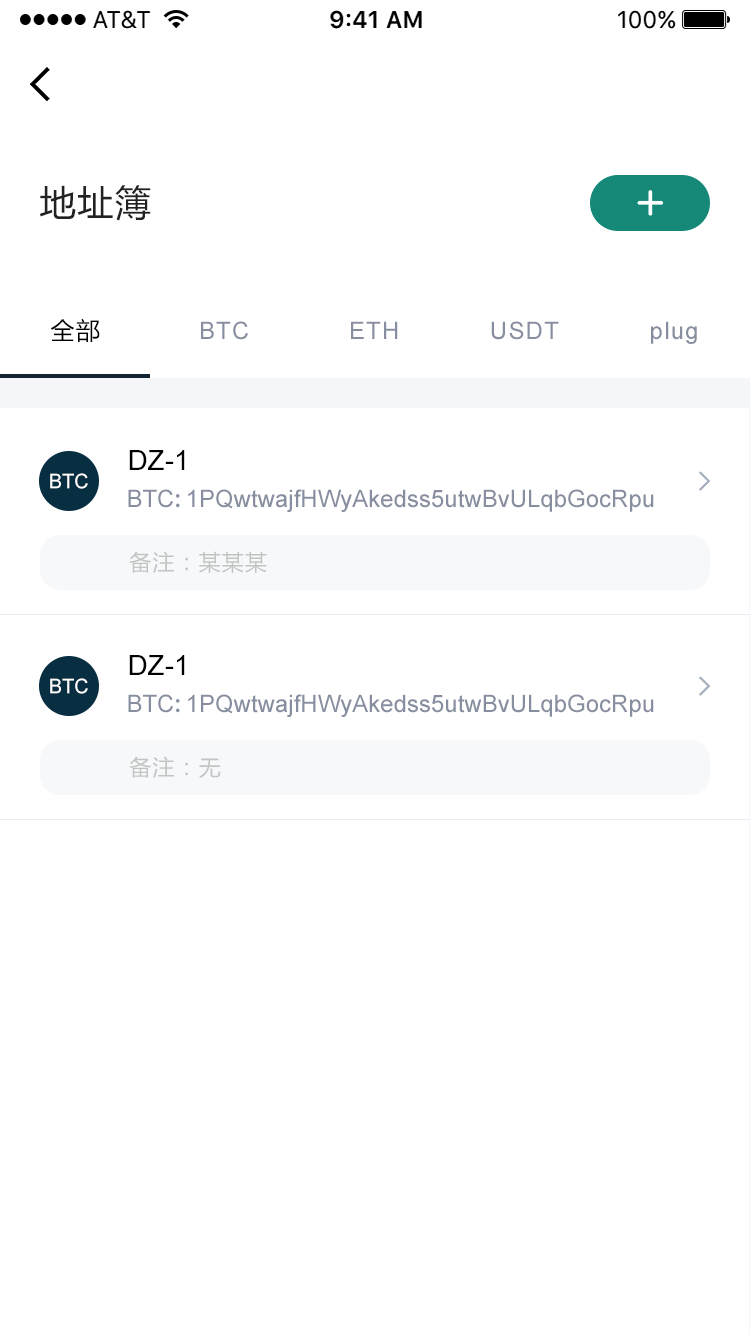
<style>
.page{position:relative;width:750px;height:1334px;background:#ffffff}
.page>*{position:absolute;margin:0}
.t1{font:36px "MicrosoftYaHei";letter-spacing:0.05em;color:#222222}
.t2{font:24px "MicrosoftYaHei";letter-spacing:0.05em;color:#000000}
.t3{font:24px "ArialMT";letter-spacing:0.05em;color:#878e9f}
.t4{font:28px "ArialMT";color:#000000}
.t5{font:20px "ArialMT";color:#ffffff}
.t6{font:24px "ArialMT";color:#878e9f}
.t7{font:24px "AdobeHeitiStd-Regular";color:#878e9f}
.t8{font:22px "MicrosoftYaHei";letter-spacing:0.05em;color:#c2c3c3}
</style>
<div class="page">
<p class="t1" style="left:39px;top:185px;width:112px;height:36px">地址簿</p>
<p class="t2" style="left:50px;top:319px;width:50px;height:23px">全部</p>
<p class="t3" style="left:201px;top:321px;width:47px;height:19px">BTC</p>
<p class="t3" style="left:351px;top:321px;width:47px;height:18px">ETH</p>
<p class="t3" style="left:491px;top:321px;width:68px;height:19px">USDT</p>
<p class="t3" style="left:651px;top:321px;width:46px;height:23px">plug</p>
<p class="t4" style="left:129px;top:450px;width:56px;height:20px">DZ-1</p>
<p class="t5" style="left:50px;top:473px;width:38px;height:16px">BTC</p>
<p class="t6" style="left:128px;top:489px;width:526px;height:23px">BTC<span class="t7">: </span>1PQwtwajfHWyAkedss5utwBvULqbGocRpu</p>
<p class="t8" style="left:129px;top:551px;width:138px;height:22px">备注：某某某</p>
<p class="t4" style="left:129px;top:655px;width:56px;height:20px">DZ-1</p>
<p class="t5" style="left:50px;top:678px;width:38px;height:16px">BTC</p>
<p class="t6" style="left:128px;top:694px;width:526px;height:23px">BTC<span class="t7">: </span>1PQwtwajfHWyAkedss5utwBvULqbGocRpu</p>
<p class="t8" style="left:129px;top:756px;width:92px;height:22px">备注：无</p>
</div>
